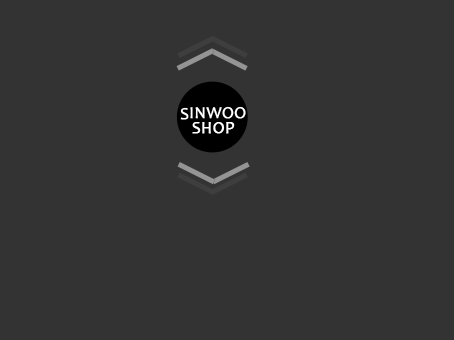
<style>
.page{position:relative;width:454px;height:340px;background:#333333}
.page>*{position:absolute;margin:0}
.t1{font:17px "Candara";color:#ffffff;font-weight:bold}
</style>
<div class="page">
<p class="t1" style="left:180px;top:106px;width:66px;height:14px">SINWOO</p>
<p class="t1" style="left:192px;top:122px;width:43px;height:12px">SHOP</p>
</div>
